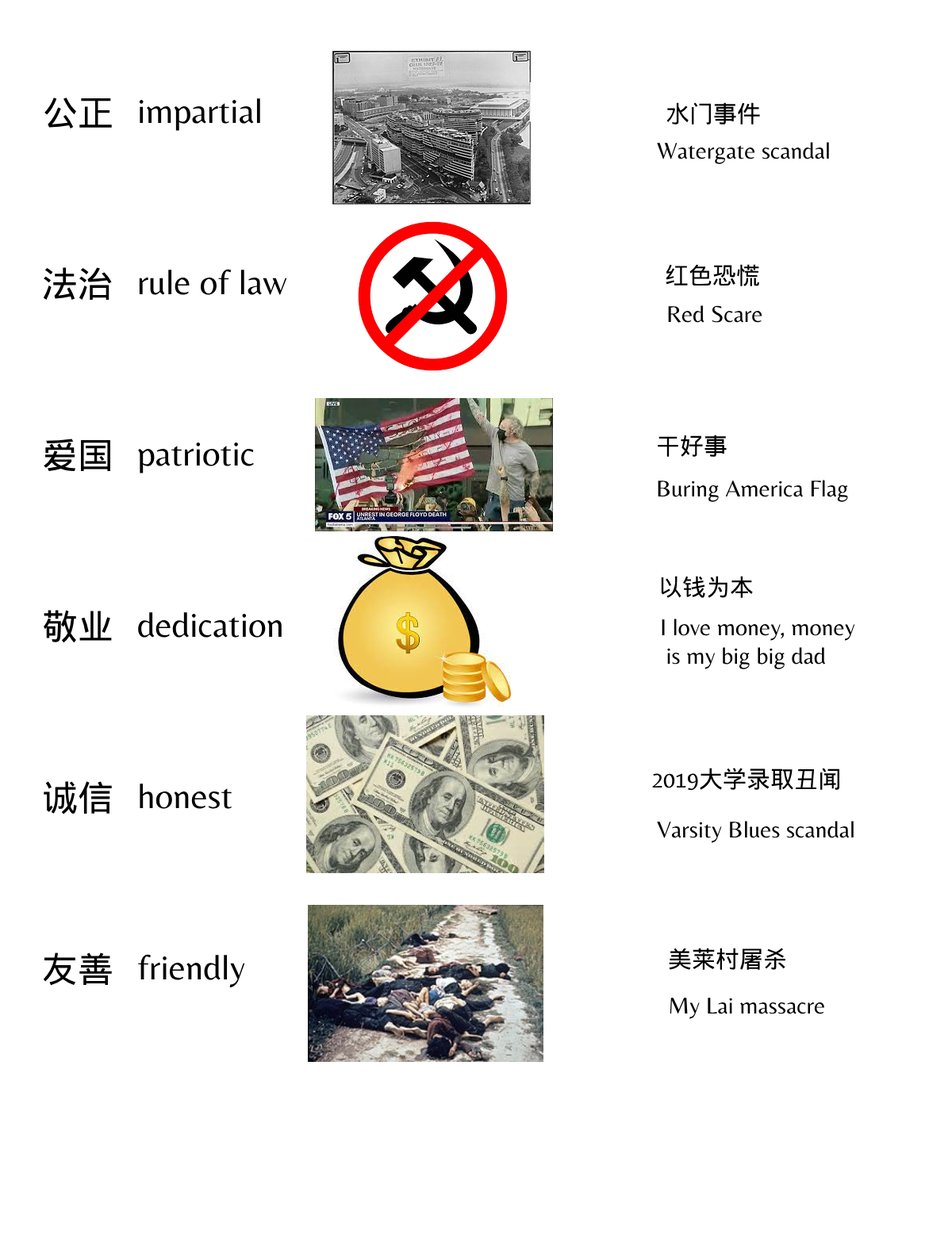
<style>
.page{position:relative;width:952px;height:1253px;background:#ffffff}
.page>*{position:absolute;margin:0}
.t1{font:35.7px "DroidSansFallback";color:#000000}
.t2{font:35.7px "Belleza-Regular";color:#000000}
.t3{font:23.8px "DroidSansFallback";color:#000000}
.t4{font:23.8px "Belleza-Regular";color:#000000}
</style>
<div class="page">
<p class="t1" style="left:43px;top:98px;width:69px;height:888px">公正<br><br><br><br>法治<br><br><br><br>爱国<br><br><br><br>敬业<br><br><br><br>诚信<br><br><br><br>友善</p>
<p class="t2" style="left:137px;top:98px;width:150px;height:889px">impartial<br><br><br><br>rule of law<br><br><br><br>patriotic<br><br><br><br>dedication<br><br><br><br>honest<br><br><br><br>friendly</p>
<p class="t3" style="left:666px;top:102px;width:94px;height:23px">水门事件</p>
<p class="t4" style="left:657px;top:142px;width:172px;height:22px">Watergate scandal</p>
<p class="t3" style="left:665px;top:264px;width:94px;height:22px">红色恐慌</p>
<p class="t4" style="left:668px;top:305px;width:94px;height:18px">Red Scare</p>
<p class="t3" style="left:657px;top:435px;width:69px;height:22px">干好事</p>
<p class="t4" style="left:657px;top:480px;width:191px;height:22px">Buring America Flag</p>
<p class="t3" style="left:661px;top:576px;width:92px;height:22px">以钱为本</p>
<p class="t4" style="left:661px;top:619px;width:194px;height:50px">I love money, money<br> is my big big dad</p>
<p class="t3" style="left:652px;top:768px;width:187px;height:23px"><span class="t4">2019</span>大学录取丑闻</p>
<p class="t4" style="left:657px;top:821px;width:196px;height:22px">Varsity Blues scandal</p>
<p class="t3" style="left:669px;top:948px;width:116px;height:22px">美莱村屠杀</p>
<p class="t4" style="left:669px;top:998px;width:155px;height:21px">My Lai massacre</p>
</div>
